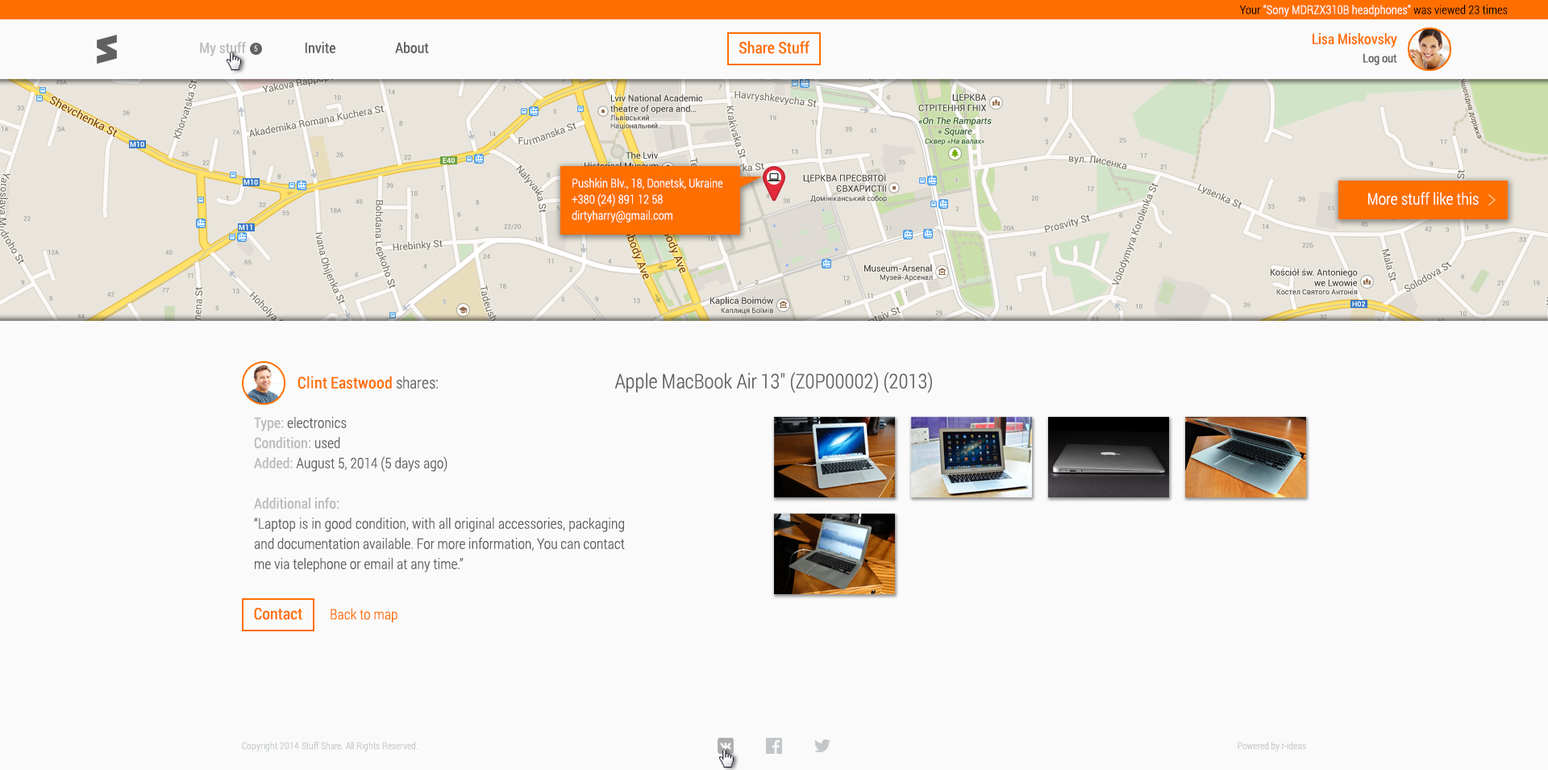
<style>
.page{position:relative;width:1548px;height:770px;background:#fafafa}
.page>*{position:absolute;margin:0}
.t1{font:12.1px "RobotoCondensed-Light";color:#fefefe}
.t2{font:12.1px "RobotoCondensed-Light";color:#030303}
.t3{font:14.5px "RobotoCondensed-Regular";color:#bdbdbd}
.t4{font:14.5px "RobotoCondensed-Regular";color:#616161}
.t5{font:16.1px "RobotoCondensed-Regular";color:#ff6f00}
.t6{font:14.5px "RobotoCondensed-Regular";color:#ff6f00}
.t7{font:8.1px "RobotoCondensed-Light";color:#fafafa}
.t8{font:12.1px "RobotoCondensed-Regular";color:#616161}
.t9{font:12.1px/16.1px "RobotoCondensed-Light";color:#fefefe}
.t10{font:16.1px "RobotoCondensed-Light";color:#fefefe}
.t11{font:16.1px "RobotoCondensed-Light";color:#616161}
.t12{font:20.2px "RobotoCondensed-Light";color:#616161}
.t13{font:14.5px/20.2px "RobotoCondensed-Light";color:#616161}
.t14{font:14.5px/20.2px "RobotoCondensed-Regular";color:#bdbdbd}
.t15{font:14.5px "RobotoCondensed-Light";color:#ff6f00}
.t16{font:9.7px "RobotoCondensed-Light";color:#c2c6c8}
</style>
<div class="page">
<p class="t1" style="left:1239px;top:5px;width:269px;height:12px"><span class="t2">Your </span>“Sony MDRZX310B headphones” <span class="t2">was viewed 23 times</span></p>
<p class="t3" style="left:200px;top:41px;width:46px;height:15px">My stuff</p>
<p class="t4" style="left:305px;top:42px;width:30px;height:11px">Invite</p>
<p class="t4" style="left:395px;top:42px;width:34px;height:11px">About</p>
<p class="t5" style="left:739px;top:40px;width:71px;height:14px">Share Stuff</p>
<p class="t6" style="left:1313px;top:33px;width:85px;height:15px">Lisa Miskovsky</p>
<p class="t7" style="left:254px;top:45px;width:4px;height:7px">5</p>
<p class="t8" style="left:1364px;top:53px;width:34px;height:12px">Log out</p>
<p class="t9" style="left:572px;top:178px;width:151px;height:45px;text-align:justify">Pushkin Blv., 18, Donetsk, Ukraine<br>+380 (24) 891 12 58<br>dirtyharry@gmail.com</p>
<p class="t10" style="left:1369px;top:192px;width:110px;height:13px">More stuff like this</p>
<p class="t5" style="left:298px;top:376px;width:140px;height:13px">Clint Eastwood <span class="t11">shares:</span></p>
<p class="t12" style="left:614px;top:372px;width:318px;height:22px">Apple MacBook Air 13" (Z0P00002) (2013)</p>
<p class="t13" style="left:254px;top:417px;width:371px;height:156px;text-align:justify"><span class="t14">Type: </span>electronics<br><span class="t14">Condition: </span>used<br><span class="t14">Added: </span>August 5, 2014 (5 days ago)<br><br><span class="t14">Additional info:<br></span>“Laptop is in good condition, with all original accessories, packaging and documentation available. For more information, You can contact me via telephone or email at any time.”</p>
<p class="t5" style="left:254px;top:607px;width:48px;height:13px">Contact</p>
<p class="t15" style="left:331px;top:608px;width:67px;height:15px">Back to map</p>
<p class="t16" style="left:242px;top:741px;width:176px;height:11px">Copyright 2014 Stuff Share. All Rights Reserved.</p>
<p class="t16" style="left:1238px;top:742px;width:68px;height:10px">Powered by r-ideas</p>
</div>
